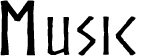
<style>
.page{position:relative;width:164px;height:56px;background:#ffffff}
.page>*{position:absolute;margin:0}
.t1{font:72px "Norse";color:#000000;font-variant:small-caps;font-weight:bold;scale:1.3 1}
</style>
<div class="page">
<p class="t1" style="left:0px;top:0px;width:136px;height:56px">Music</p>
</div>
